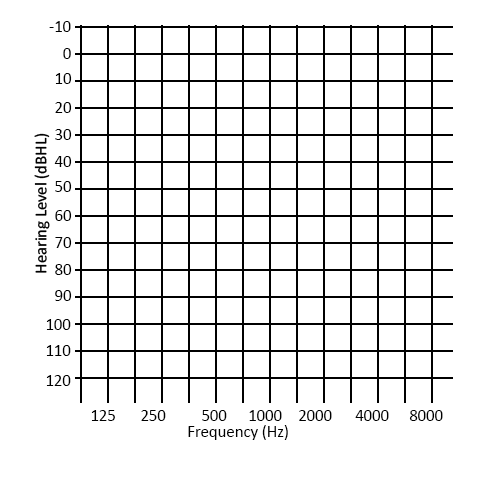
<style>
.page{position:relative;width:478px;height:478px;background:#ffffff}
.page>*{position:absolute;margin:0}
.t1{font:16.7px "Calibri";color:#000000}
</style>
<div class="page">
<p class="t1" style="left:49px;top:21px;width:22px;height:11px">-10</p>
<p class="t1" style="left:63px;top:48px;width:8px;height:11px">0</p>
<p class="t1" style="left:55px;top:73px;width:17px;height:11px">10</p>
<p class="t1" style="left:55px;top:102px;width:17px;height:11px">20</p>
<p class="t1" style="left:55px;top:129px;width:17px;height:11px">30</p>
<p class="t1" style="left:54px;top:156px;width:18px;height:11px">40</p>
<p class="t1" style="left:55px;top:181px;width:17px;height:11px">50</p>
<p class="t1" style="left:55px;top:210px;width:17px;height:11px">60</p>
<p class="t1" style="left:55px;top:237px;width:17px;height:11px">70</p>
<p class="t1" style="left:55px;top:264px;width:17px;height:11px">80</p>
<p class="t1" style="left:55px;top:290px;width:17px;height:11px">90</p>
<p class="t1" style="left:46px;top:319px;width:25px;height:11px">100</p>
<p class="t1" style="left:46px;top:345px;width:25px;height:11px">110</p>
<p class="t1" style="left:46px;top:375px;width:25px;height:11px">120</p>
<p class="t1" style="left:91px;top:410px;width:24px;height:11px">125</p>
<p class="t1" style="left:141px;top:410px;width:25px;height:11px">250</p>
<p class="t1" style="left:202px;top:410px;width:25px;height:11px">500</p>
<p class="t1" style="left:249px;top:410px;width:33px;height:11px">1000</p>
<p class="t1" style="left:299px;top:410px;width:33px;height:11px">2000</p>
<p class="t1" style="left:355px;top:410px;width:34px;height:11px">4000</p>
<p class="t1" style="left:409px;top:410px;width:34px;height:11px">8000</p>
<p class="t1" style="left:188px;top:425px;width:100px;height:15px">Frequency (Hz)</p>
</div>
